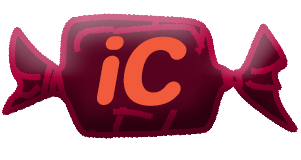
<style>
.page{position:relative;width:301px;height:160px;background:#ffffff}
.page>*{position:absolute;margin:0}
.t1{font:87.5px "Jellee-Roman";color:#f15b3c;font-style:italic}
</style>
<div class="page">
<p class="t1" style="left:97px;top:36px;width:90px;height:70px">iC</p>
</div>
